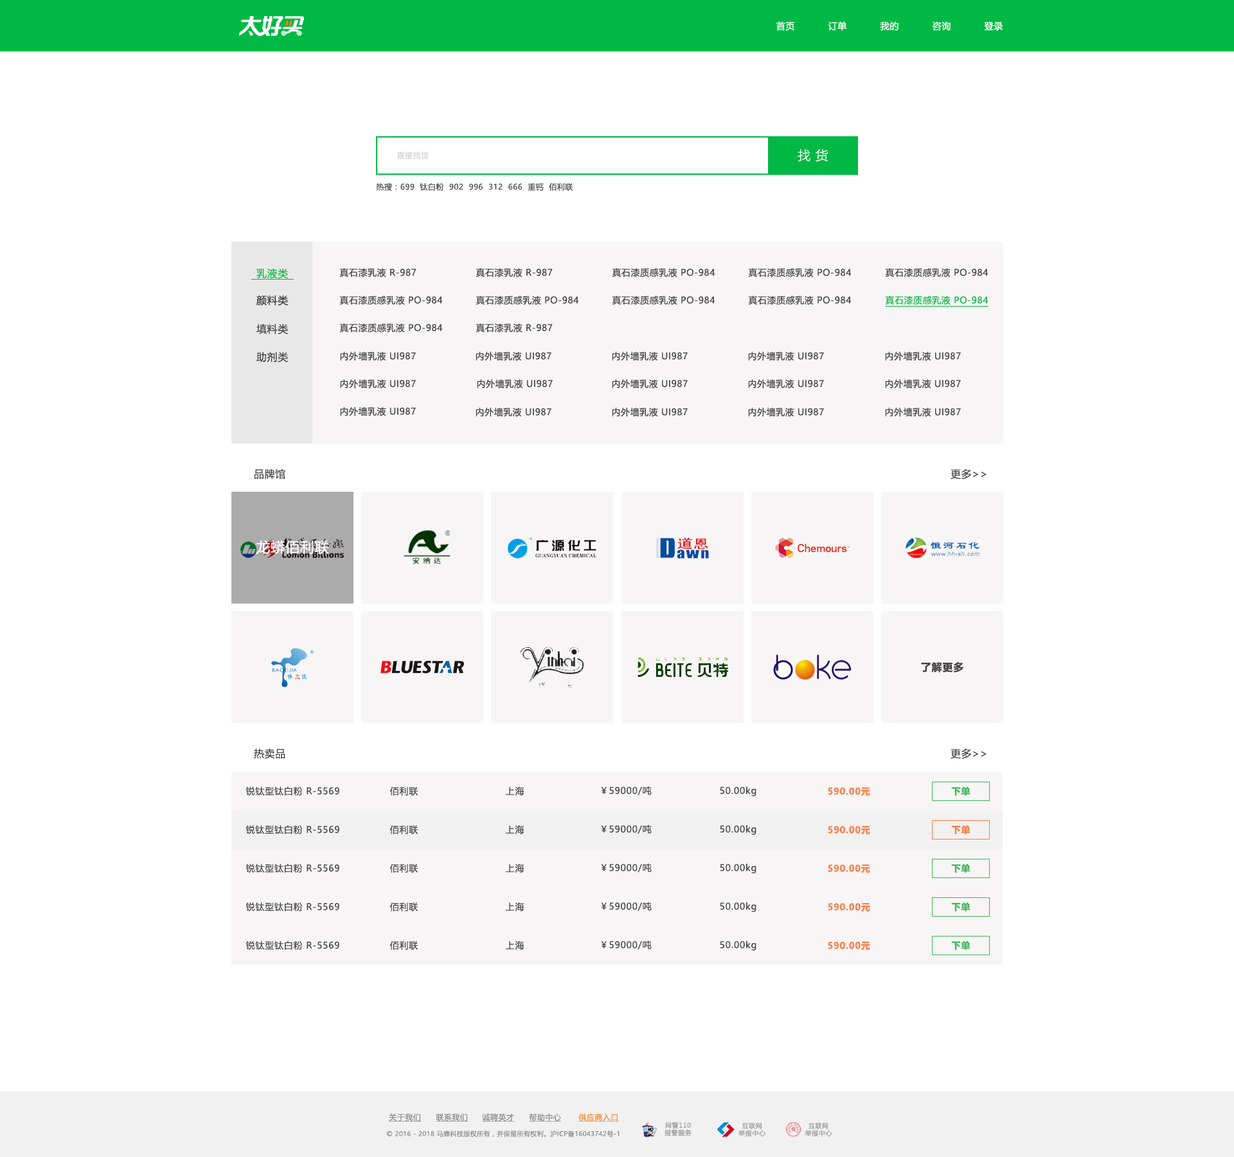
<style>
.page{position:relative;width:1234px;height:1157px;background:#ffffff}
.page>*{position:absolute;margin:0}
.t1{font:9px "MicrosoftYaHeiUI";letter-spacing:0.04em;color:#ffffff}
.t2{font:12.9px "MicrosoftYaHeiUILight";letter-spacing:0.38em;color:#ffffff}
.t3{font:7.7px "MicrosoftYaHeiUI";letter-spacing:0.04em;color:#d2d2d2}
.t4{font:7.7px "MicrosoftYaHeiUI";letter-spacing:0.04em;color:#444444}
.t5{font:10.3px "MicrosoftYaHeiUI";letter-spacing:0.04em;color:#00b945}
.t6{font:9px "MicrosoftYaHeiUI";letter-spacing:0.04em;color:#424242}
.t7{font:10.3px "MicrosoftYaHeiUI";letter-spacing:0.04em;color:#313131}
.t8{font:9px "MicrosoftYaHeiUI";letter-spacing:0.04em;color:#414141}
.t9{font:9px "MicrosoftYaHeiUI";letter-spacing:0.04em;color:#00b945}
.t10{font:10.3px "MicrosoftYaHeiUI";letter-spacing:0.04em;color:#424242}
.t11{font:14.1px "MicrosoftYaHeiUI";letter-spacing:0.04em;color:#ffffff}
.t12{font:10.3px "MicrosoftYaHeiUI-Bold";letter-spacing:0.06em;color:#424242}
.t13{font:9px "MicrosoftYaHeiUI";letter-spacing:0.06em;color:#444444}
.t14{font:9px "MicrosoftYaHeiUI-Bold";letter-spacing:0.06em;color:#ff7b41}
.t15{font:9px "MicrosoftYaHeiUI-Bold";letter-spacing:0.06em;color:#3db858}
.t16{font:7.7px "MicrosoftYaHeiUI";letter-spacing:0.04em;color:#8c8c8c;text-decoration:underline}
.t17{font:7.7px "MicrosoftYaHeiUI";letter-spacing:0.04em;color:#ff8b25;text-decoration:underline}
.t18{font:6.4px/7.5px "MicrosoftYaHei";letter-spacing:0.06em;color:#999999}
.t19{font:6.4px "MicrosoftYaHeiUI";letter-spacing:0.04em;color:#8c8c8c}
</style>
<div class="page">
<p class="t1" style="left:777px;top:21px;width:18px;height:10px">首页</p>
<p class="t1" style="left:828px;top:21px;width:19px;height:10px">订单</p>
<p class="t1" style="left:880px;top:21px;width:19px;height:10px">我的</p>
<p class="t1" style="left:933px;top:21px;width:18px;height:10px">咨询</p>
<p class="t1" style="left:984px;top:21px;width:20px;height:10px">登录</p>
<p class="t2" style="left:798px;top:149px;width:30px;height:13px">找货</p>
<p class="t3" style="left:397px;top:151px;width:32px;height:8px">直接找货</p>
<p class="t4" style="left:376px;top:183px;width:197px;height:8px">热搜：699  钛白粉  902  996  312  666  重钙  佰利联</p>
<p class="t5" style="left:256px;top:268px;width:33px;height:11px">乳液类</p>
<p class="t6" style="left:339px;top:268px;width:78px;height:9px">真石漆乳液 R-987</p>
<p class="t6" style="left:476px;top:268px;width:77px;height:9px">真石漆乳液 R-987</p>
<p class="t6" style="left:612px;top:268px;width:104px;height:9px">真石漆质感乳液 PO-984</p>
<p class="t6" style="left:748px;top:268px;width:104px;height:9px">真石漆质感乳液 PO-984</p>
<p class="t6" style="left:885px;top:268px;width:104px;height:9px">真石漆质感乳液 PO-984</p>
<p class="t7" style="left:256px;top:295px;width:33px;height:11px">颜料类</p>
<p class="t6" style="left:339px;top:296px;width:104px;height:9px">真石漆质感乳液 PO-984</p>
<p class="t6" style="left:476px;top:296px;width:103px;height:9px">真石漆质感乳液 PO-984</p>
<p class="t6" style="left:612px;top:296px;width:104px;height:9px">真石漆质感乳液 PO-984</p>
<p class="t8" style="left:748px;top:296px;width:104px;height:9px">真石漆质感乳液 PO-984</p>
<p class="t9" style="left:885px;top:296px;width:104px;height:9px">真石漆质感乳液 PO-984</p>
<p class="t10" style="left:256px;top:324px;width:33px;height:10px">填料类</p>
<p class="t6" style="left:339px;top:323px;width:104px;height:9px">真石漆质感乳液 PO-984</p>
<p class="t6" style="left:476px;top:323px;width:77px;height:9px">真石漆乳液 R-987</p>
<p class="t10" style="left:256px;top:352px;width:33px;height:11px">助剂类</p>
<p class="t6" style="left:340px;top:352px;width:76px;height:9px">内外墙乳液 UI987</p>
<p class="t6" style="left:476px;top:352px;width:76px;height:9px">内外墙乳液 UI987</p>
<p class="t6" style="left:612px;top:352px;width:76px;height:9px">内外墙乳液 UI987</p>
<p class="t6" style="left:748px;top:352px;width:76px;height:9px">内外墙乳液 UI987</p>
<p class="t6" style="left:885px;top:352px;width:76px;height:9px">内外墙乳液 UI987</p>
<p class="t6" style="left:340px;top:379px;width:76px;height:9px">内外墙乳液 UI987</p>
<p class="t6" style="left:477px;top:379px;width:76px;height:9px">内外墙乳液 UI987</p>
<p class="t6" style="left:612px;top:379px;width:76px;height:9px">内外墙乳液 UI987</p>
<p class="t6" style="left:748px;top:379px;width:76px;height:9px">内外墙乳液 UI987</p>
<p class="t6" style="left:885px;top:379px;width:76px;height:9px">内外墙乳液 UI987</p>
<p class="t6" style="left:340px;top:407px;width:76px;height:9px">内外墙乳液 UI987</p>
<p class="t6" style="left:476px;top:408px;width:76px;height:9px">内外墙乳液 UI987</p>
<p class="t6" style="left:612px;top:408px;width:76px;height:9px">内外墙乳液 UI987</p>
<p class="t6" style="left:748px;top:408px;width:76px;height:9px">内外墙乳液 UI987</p>
<p class="t6" style="left:885px;top:408px;width:76px;height:9px">内外墙乳液 UI987</p>
<p class="t10" style="left:255px;top:469px;width:30px;height:11px">品牌馆</p>
<p class="t10" style="left:951px;top:469px;width:36px;height:11px">更多&gt;&gt;</p>
<p class="t11" style="left:256px;top:540px;width:73px;height:15px">龙蟒佰利联</p>
<p class="t12" style="left:921px;top:662px;width:43px;height:11px">了解更多</p>
<p class="t10" style="left:254px;top:748px;width:31px;height:11px">热卖品</p>
<p class="t10" style="left:951px;top:748px;width:36px;height:11px">更多&gt;&gt;</p>
<p class="t13" style="left:246px;top:786px;width:93px;height:10px">锐钛型钛白粉 R-5569</p>
<p class="t13" style="left:390px;top:787px;width:28px;height:9px">佰利联</p>
<p class="t13" style="left:505px;top:787px;width:20px;height:9px">上海</p>
<p class="t13" style="left:601px;top:786px;width:51px;height:9px">￥59000/吨</p>
<p class="t13" style="left:720px;top:786px;width:37px;height:11px">50.00kg</p>
<p class="t14" style="left:828px;top:788px;width:42px;height:8px">590.00元</p>
<p class="t15" style="left:951px;top:787px;width:20px;height:9px">下单</p>
<p class="t13" style="left:246px;top:825px;width:93px;height:9px">锐钛型钛白粉 R-5569</p>
<p class="t13" style="left:390px;top:825px;width:28px;height:9px">佰利联</p>
<p class="t13" style="left:505px;top:825px;width:20px;height:9px">上海</p>
<p class="t13" style="left:601px;top:825px;width:51px;height:9px">￥59000/吨</p>
<p class="t13" style="left:720px;top:825px;width:37px;height:10px">50.00kg</p>
<p class="t14" style="left:828px;top:826px;width:42px;height:8px">590.00元</p>
<p class="t14" style="left:951px;top:825px;width:20px;height:9px">下单</p>
<p class="t13" style="left:246px;top:863px;width:93px;height:10px">锐钛型钛白粉 R-5569</p>
<p class="t13" style="left:390px;top:864px;width:28px;height:9px">佰利联</p>
<p class="t13" style="left:505px;top:864px;width:20px;height:9px">上海</p>
<p class="t13" style="left:601px;top:863px;width:51px;height:9px">￥59000/吨</p>
<p class="t13" style="left:720px;top:863px;width:37px;height:11px">50.00kg</p>
<p class="t14" style="left:828px;top:865px;width:42px;height:8px">590.00元</p>
<p class="t15" style="left:951px;top:864px;width:20px;height:9px">下单</p>
<p class="t13" style="left:246px;top:902px;width:93px;height:10px">锐钛型钛白粉 R-5569</p>
<p class="t13" style="left:390px;top:903px;width:28px;height:9px">佰利联</p>
<p class="t13" style="left:505px;top:903px;width:20px;height:9px">上海</p>
<p class="t13" style="left:601px;top:902px;width:51px;height:9px">￥59000/吨</p>
<p class="t13" style="left:720px;top:902px;width:37px;height:10px">50.00kg</p>
<p class="t14" style="left:828px;top:903px;width:42px;height:9px">590.00元</p>
<p class="t15" style="left:951px;top:903px;width:20px;height:9px">下单</p>
<p class="t13" style="left:246px;top:941px;width:93px;height:9px">锐钛型钛白粉 R-5569</p>
<p class="t13" style="left:390px;top:941px;width:28px;height:9px">佰利联</p>
<p class="t13" style="left:505px;top:941px;width:20px;height:9px">上海</p>
<p class="t13" style="left:601px;top:941px;width:51px;height:9px">￥59000/吨</p>
<p class="t13" style="left:720px;top:941px;width:37px;height:10px">50.00kg</p>
<p class="t14" style="left:828px;top:942px;width:42px;height:8px">590.00元</p>
<p class="t15" style="left:951px;top:941px;width:20px;height:9px">下单</p>
<p class="t16" style="left:389px;top:1113px;width:33px;height:9px">关于我们</p>
<p class="t16" style="left:436px;top:1113px;width:33px;height:9px">联系我们</p>
<p class="t16" style="left:482px;top:1113px;width:33px;height:9px">诚聘英才</p>
<p class="t16" style="left:529px;top:1113px;width:33px;height:9px">帮助中心</p>
<p class="t17" style="left:579px;top:1113px;width:40px;height:9px">供应商入口</p>
<p class="t18" style="left:665px;top:1122px;width:27px;height:15px;text-align:center">网警110<br>报警服务</p>
<p class="t19" style="left:387px;top:1130px;width:233px;height:7px">© 2016 - 2018 马蜂科技版权所有，并保留所有权利。沪ICP备16043742号-1</p>
<p class="t18" style="left:739px;top:1122px;width:27px;height:15px;text-align:center">互联网<br>举报中心</p>
<p class="t18" style="left:805px;top:1122px;width:28px;height:15px;text-align:center">互联网<br>举报中心</p>
</div>
